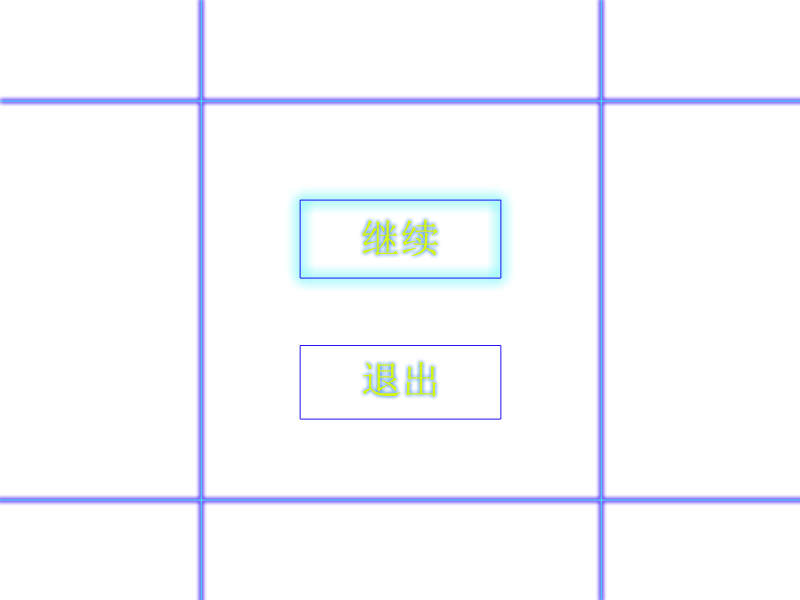
<style>
.page{position:relative;width:800px;height:600px;background:#ffffff}
.page>*{position:absolute;margin:0}
.t1{font:40px "SimSun";color:#d8f516}
</style>
<div class="page">
<p class="t1" style="left:362px;top:219px;width:77px;height:38px">继续</p>
<p class="t1" style="left:362px;top:361px;width:75px;height:36px">退出</p>
</div>
